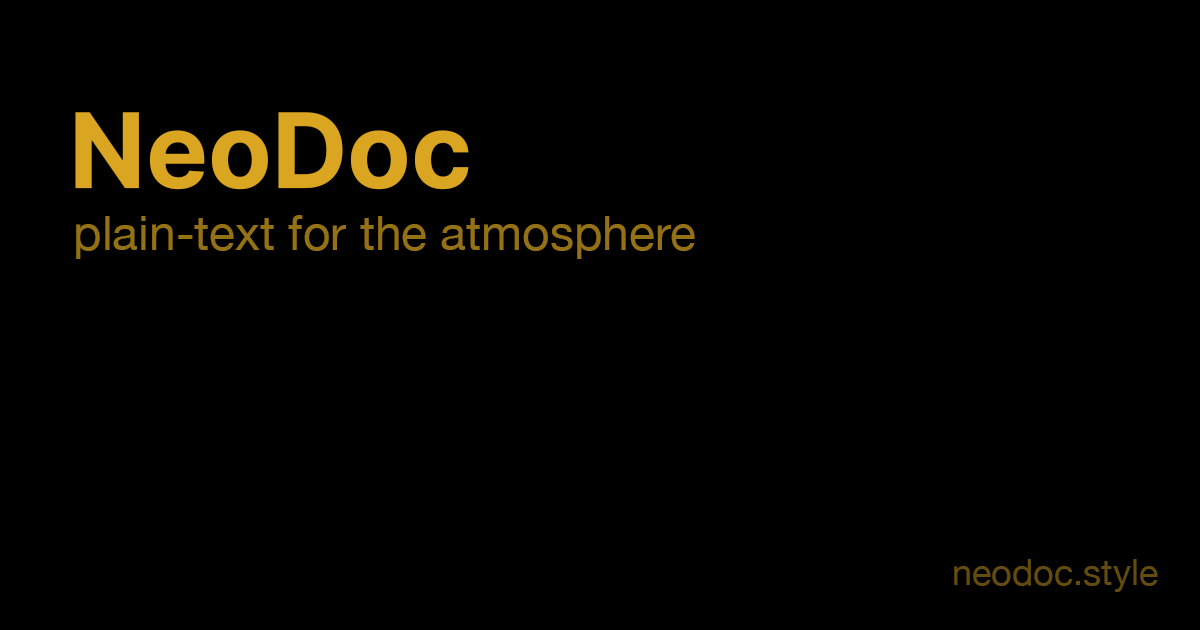
<style>
.page{position:relative;width:1200px;height:630px;background:#000000}
.page>*{position:absolute;margin:0}
.t1{font:104px "Inter-Bold";color:#daa520}
.t2{font:48px "HelveticaNeue";color:#957116}
.t3{font:36px "HelveticaNeue";color:#644c0f}
</style>
<div class="page">
<p class="t1" style="left:75px;top:112px;width:394px;height:78px">NeoDoc</p>
<p class="t2" style="left:76px;top:215px;width:619px;height:44px">plain-text for the atmosphere</p>
<p class="t3" style="left:954px;top:559px;width:204px;height:33px">neodoc.style</p>
</div>
